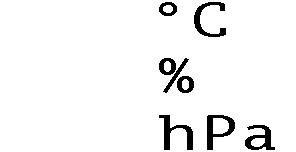
<style>
.page{position:relative;width:296px;height:152px;background:#ffffff}
.page>*{position:absolute;margin:0}
.t1{font:50px "PTMono-Regular";letter-spacing:0.025em;color:#000000;scale:1.3 1}
</style>
<div class="page">
<p class="t1" style="left:159px;top:2px;width:67px;height:35px">°C</p>
<p class="t1" style="left:159px;top:58px;width:35px;height:35px">%</p>
<p class="t1" style="left:159px;top:115px;width:116px;height:35px">hPa</p>
</div>
